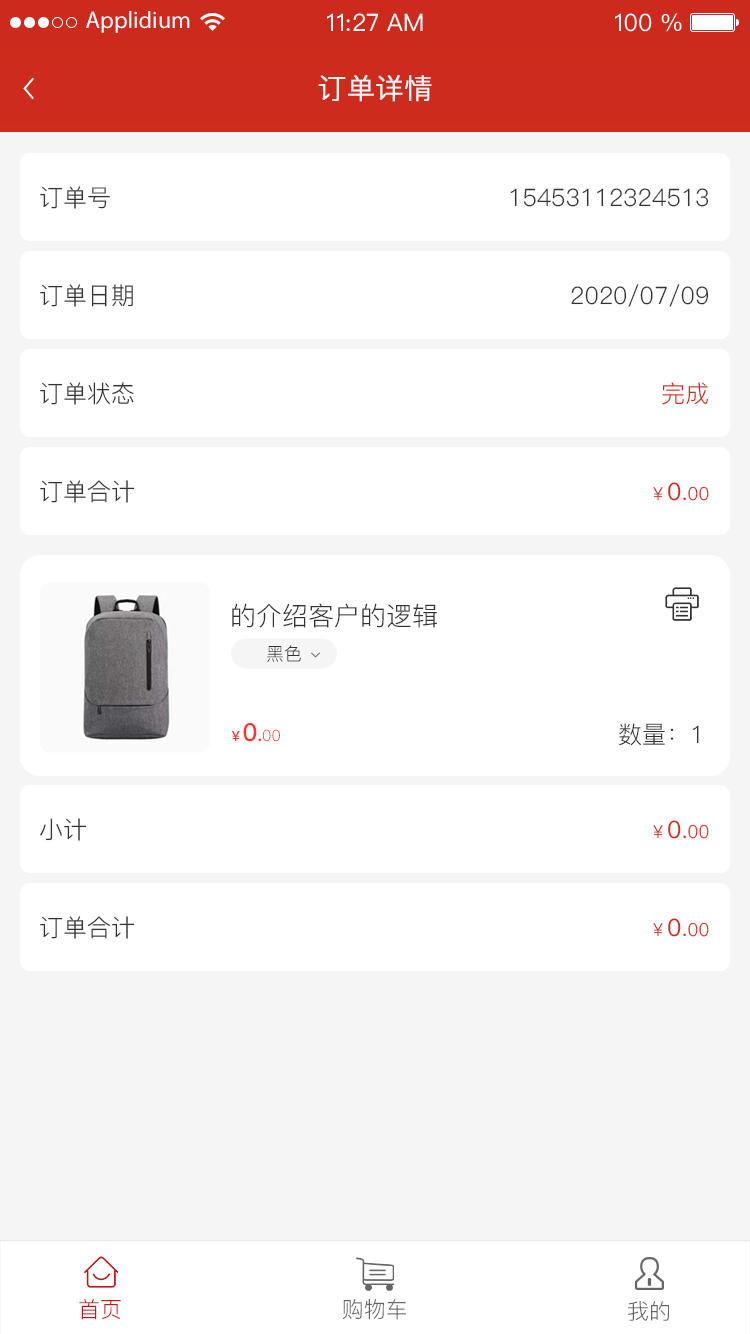
<style>
.page{position:relative;width:750px;height:1334px;background:#ffffff}
.page>*{position:absolute;margin:0}
.t1{font:24px "MyriadPro-Regular";color:#ffffff}
.t2{font:24px "PingFangSC-Regular";color:#ffffff}
.t3{font:28px "PingFang-SC-Regular";color:#f5f5f5;text-transform:uppercase;font-weight:bold}
.t4{font:24px "PingFang-SC-Regular";color:#333333;text-transform:uppercase}
.t5{font:24px "PingFang-SC-Regular";color:#cd2b1d;text-transform:uppercase}
.t6{font:18px "PingFang-SC-Regular";color:#cd2b1d;text-transform:uppercase}
.t7{font:24px "PingFang-SC-Medium";color:#cd2b1d;text-transform:uppercase}
.t8{font:26px "PingFang-SC-Regular";color:#333333}
.t9{font:18px "PingFang-SC-Regular";color:#333333}
.t10{font:15.5px "PingFang-SC-Regular";color:#ff3333}
.t11{font:13.9px "PingFang-SC-Bold";color:#ff3333}
.t12{font:24.8px "PingFang-SC-Bold";color:#ff3333}
.t13{font:17px "PingFang-SC-Bold";color:#ff3333}
.t14{font:24px "PingFang-SC-Regular";color:#333333}
.t15{font:22px "PingFang-SC-Regular";color:#c31618}
.t16{font:22px "PingFang-SC-Regular";color:#666666}
</style>
<div class="page">
<p class="t1" style="left:86px;top:11px;width:104px;height:22px">Applidium</p>
<p class="t2" style="left:327px;top:13px;width:96px;height:18px">11:27 AM</p>
<p class="t2" style="left:615px;top:13px;width:67px;height:19px">100 %</p>
<p class="t3" style="left:318px;top:75px;width:114px;height:27px">订单详情</p>
<p class="t4" style="left:40px;top:186px;width:70px;height:23px">订单号</p>
<p class="t4" style="left:510px;top:188px;width:199px;height:19px">15453112324513</p>
<p class="t4" style="left:40px;top:284px;width:93px;height:23px">订单日期</p>
<p class="t4" style="left:571px;top:284px;width:138px;height:23px">2020/07/09</p>
<p class="t4" style="left:40px;top:382px;width:94px;height:23px">订单状态</p>
<p class="t5" style="left:662px;top:382px;width:46px;height:23px">完成</p>
<p class="t4" style="left:40px;top:480px;width:95px;height:23px">订单合计</p>
<p class="t6" style="left:653px;top:482px;width:56px;height:19px">￥<span class="t7">0</span><span class="t5">.</span>00</p>
<p class="t8" style="left:232px;top:603px;width:205px;height:25px">的介绍客户的逻辑</p>
<p class="t9" style="left:267px;top:645px;width:34px;height:17px">黑色</p>
<p class="t10" style="left:231px;top:723px;width:49px;height:19px"><span class="t11">￥</span><span class="t12">0</span><span class="t13">.</span>00</p>
<p class="t14" style="left:619px;top:723px;width:80px;height:23px">数量：1</p>
<p class="t4" style="left:40px;top:818px;width:47px;height:23px">小计</p>
<p class="t6" style="left:653px;top:820px;width:56px;height:19px">￥<span class="t7">0</span><span class="t5">.</span>00</p>
<p class="t4" style="left:40px;top:916px;width:95px;height:23px">订单合计</p>
<p class="t6" style="left:653px;top:918px;width:56px;height:19px">￥<span class="t7">0</span><span class="t5">.</span>00</p>
<p class="t15" style="left:79px;top:1299px;width:42px;height:21px">首页</p>
<p class="t16" style="left:342px;top:1299px;width:64px;height:21px">购物车</p>
<p class="t16" style="left:628px;top:1301px;width:41px;height:20px">我的</p>
</div>
